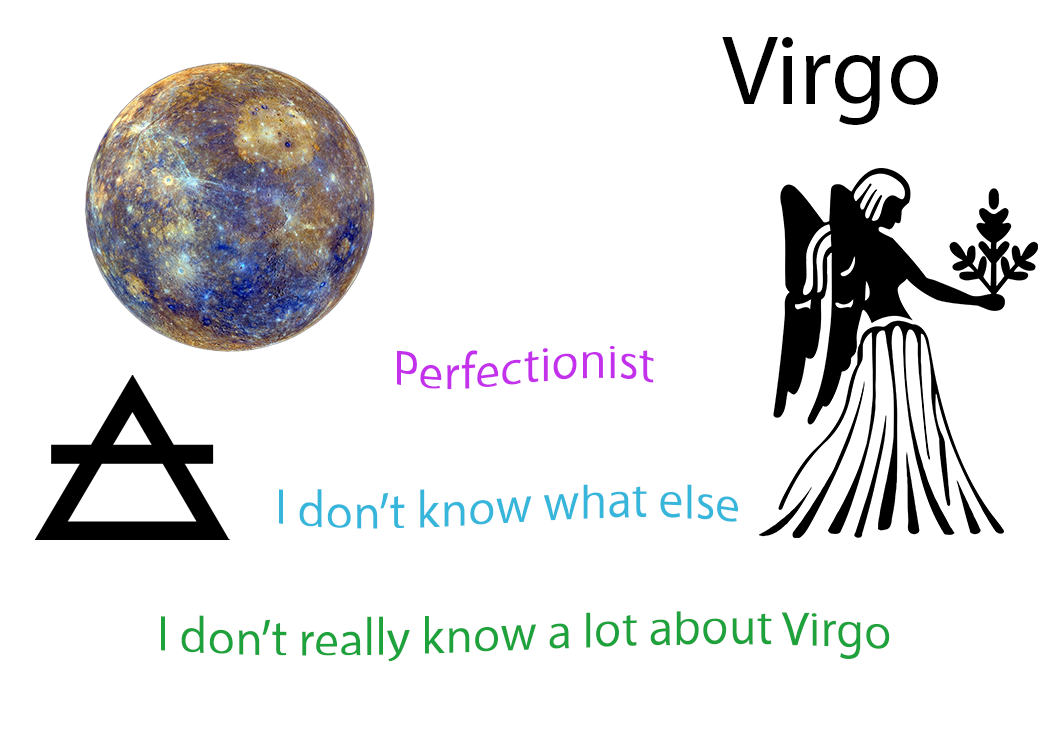
<style>
.page{position:relative;width:1050px;height:750px;background:#ffffff}
.page>*{position:absolute;margin:0}
.t1{font:100px "MyriadPro-Regular";color:#000000}
.t2{font:50px "MyriadPro-Regular";color:#c331ed}
.t3{font:50px "MyriadPro-Regular";color:#36b6db}
.t4{font:50px "MyriadPro-Regular";color:#1da23c}
</style>
<div class="page">
<p class="t1" style="left:722px;top:37px;width:216px;height:88px">Virgo</p>
<p class="t2" style="left:397px;top:345px;width:257px;height:45px">Perfectionist</p>
<p class="t3" style="left:279px;top:484px;width:459px;height:45px">I don’t know what else</p>
<p class="t4" style="left:161px;top:611px;width:729px;height:51px">I don’t really know a lot about Virgo</p>
</div>
